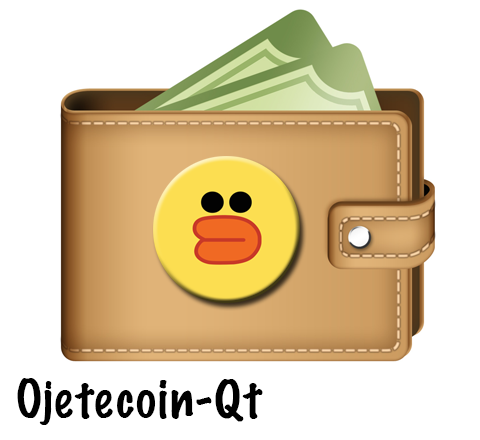
<style>
.page{position:relative;width:480px;height:440px;background:#ffffff}
.page>*{position:absolute;margin:0}
.t1{font:48px "MarkerFelt-Thin";color:#000000}
</style>
<div class="page">
<p class="t1" style="left:17px;top:378px;width:246px;height:47px">Ojetecoin-Qt</p>
</div>
